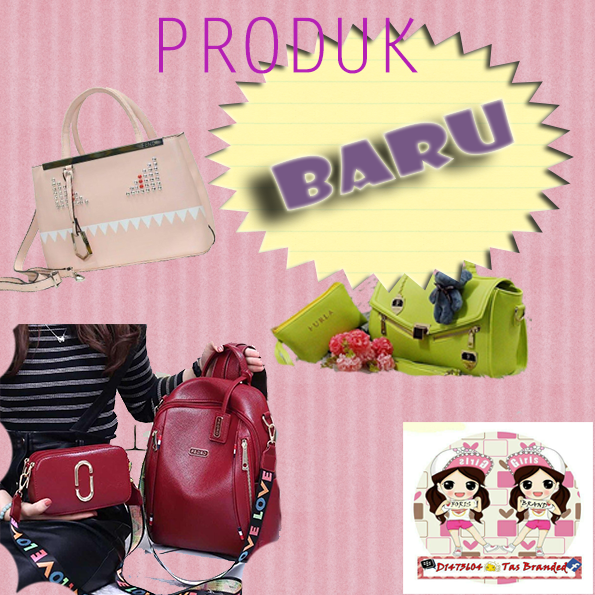
<style>
.page{position:relative;width:595px;height:595px}
.page>*{position:absolute;margin:0}
.t1{font:75.7px "LetterGothicStd";color:#b620b5}
.t2{font:62.2px "ShowcardGothic-Reg";color:#775985;scale:1.48 1}
</style>
<div class="page">
<p class="t1" style="left:159px;top:16px;width:259px;height:58px">PRODUK</p>
<p class="t2" style="left:270px;top:98px;width:245px;height:113px;rotate:-16deg">baru</p>
</div>
